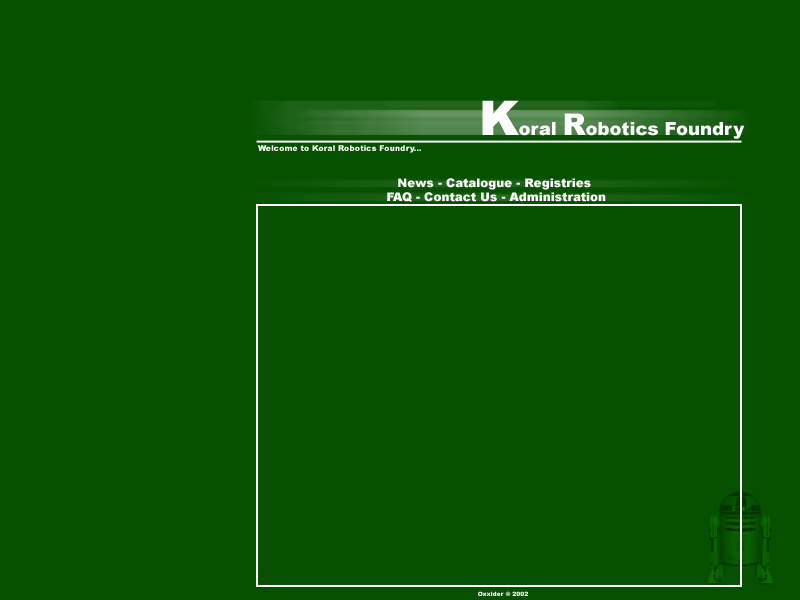
<style>
.page{position:relative;width:800px;height:600px;background:#065100}
.page>*{position:absolute;margin:0}
.t1{font:18px "Arial-Black";color:#ffffff}
.t2{font:48px "Arial-Black";color:#ffffff}
.t3{font:30px "Arial-Black";color:#ffffff}
.t4{font:8px "Arial-Black";color:#ffffff}
.t5{font:12px "Arial-Black";color:#ffffff}
.t6{font:6px "Arial-Black";color:#ffffff}
</style>
<div class="page">
<p class="t1" style="left:482px;top:100px;width:263px;height:39px"><span class="t2">K</span>oral <span class="t3">R</span>obotics Foundry</p>
<p class="t4" style="left:258px;top:145px;width:163px;height:8px">Welcome to Koral Robotics Foundry...</p>
<p class="t5" style="left:387px;top:178px;width:219px;height:24px;text-align:center">News - Catalogue - Registries <br> FAQ - Contact Us - Administration</p>
<p class="t6" style="left:478px;top:591px;width:50px;height:5px">Oxxider © 2002</p>
</div>
